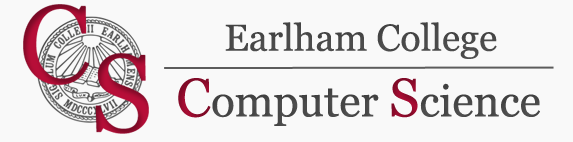
<style>
.page{position:relative;width:573px;height:142px;background:#f9f9f9}
.page>*{position:absolute;margin:0}
.t1{font:37.5px "Georgia";color:#5c5c5c}
.t2{font:44px "Georgia";color:#5c5c5c}
.t3{font:54.1px "Georgia";color:#b70e38}
</style>
<div class="page">
<p class="t1" style="left:225px;top:22px;width:272px;height:37px">Earlham College</p>
<p class="t2" style="left:178px;top:78px;width:362px;height:48px"><span class="t3">C</span>omputer <span class="t3">S</span>cience</p>
</div>
